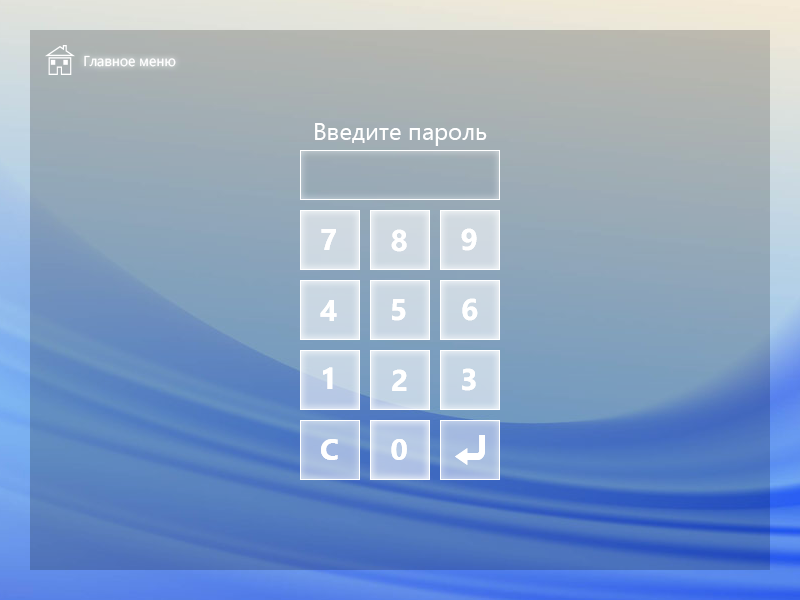
<style>
.page{position:relative;width:800px;height:600px}
.page>*{position:absolute;margin:0}
.t1{font:14.2px "SegoeUI";color:#ffffff}
.t2{font:24px "SegoeUI";color:#ffffff}
.t3{font:30px "SegoeUI-Bold";color:#ffffff}
</style>
<div class="page">
<p class="t1" style="left:84px;top:55px;width:92px;height:12px">Главное меню</p>
<p class="t2" style="left:315px;top:123px;width:172px;height:23px">Введите пароль</p>
<p class="t3" style="left:321px;top:229px;width:15px;height:21px">7</p>
<p class="t3" style="left:321px;top:229px;width:15px;height:21px">7</p>
<p class="t3" style="left:391px;top:229px;width:16px;height:23px">8</p>
<p class="t3" style="left:391px;top:229px;width:16px;height:23px">8</p>
<p class="t3" style="left:461px;top:228px;width:16px;height:23px">9</p>
<p class="t3" style="left:461px;top:228px;width:16px;height:23px">9</p>
<p class="t3" style="left:320px;top:300px;width:17px;height:21px">4</p>
<p class="t3" style="left:320px;top:300px;width:17px;height:21px">4</p>
<p class="t3" style="left:392px;top:299px;width:14px;height:22px">5</p>
<p class="t3" style="left:392px;top:299px;width:14px;height:22px">5</p>
<p class="t3" style="left:462px;top:298px;width:16px;height:23px">6</p>
<p class="t3" style="left:462px;top:298px;width:16px;height:23px">6</p>
<p class="t3" style="left:323px;top:367px;width:10px;height:22px">1</p>
<p class="t3" style="left:323px;top:367px;width:10px;height:22px">1</p>
<p class="t3" style="left:392px;top:369px;width:15px;height:22px">2</p>
<p class="t3" style="left:392px;top:369px;width:15px;height:22px">2</p>
<p class="t3" style="left:462px;top:368px;width:14px;height:23px">3</p>
<p class="t3" style="left:462px;top:368px;width:14px;height:23px">3</p>
<p class="t3" style="left:321px;top:439px;width:17px;height:21px">C</p>
<p class="t3" style="left:321px;top:439px;width:17px;height:21px">C</p>
<p class="t3" style="left:391px;top:439px;width:16px;height:21px">0</p>
<p class="t3" style="left:391px;top:439px;width:16px;height:21px">0</p>
</div>
